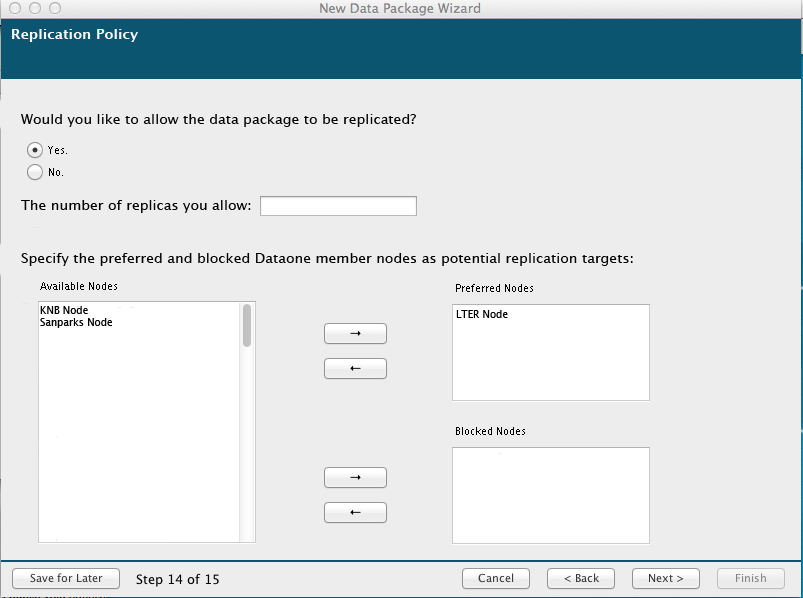
<style>
.page{position:relative;width:803px;height:598px;background:#ededed}
.page>*{position:absolute;margin:0}
.t1{font:14px "LucidaGrande-Bold";color:#fcfafa}
.t2{font:14px "LucidaGrande";color:#020202}
.t3{font:10px "LucidaGrande";color:#000000}
.t4{font:14px "LucidaGrande";color:#000000}
</style>
<div class="page">
<p class="t1" style="left:12px;top:29px;width:126px;height:13px">Replication Policy</p>
<p class="t2" style="left:21px;top:114px;width:395px;height:13px">Would you like to allow the data package to be replicated?</p>
<p class="t3" style="left:48px;top:146px;width:19px;height:8px">Yes.</p>
<p class="t3" style="left:49px;top:168px;width:14px;height:8px">No.</p>
<p class="t4" style="left:21px;top:200px;width:230px;height:13px">The number of replicas you allow:</p>
<p class="t4" style="left:21px;top:253px;width:612px;height:13px">Specify the preferred and blocked Dataone member nodes as potential replication targets:</p>
<p class="t3" style="left:40px;top:282px;width:77px;height:8px">Available Nodes</p>
<p class="t3" style="left:456px;top:284px;width:77px;height:8px">Preferred Nodes</p>
<p class="t3" style="left:40px;top:306px;width:72px;height:22px">KNB Node<br>Sanparks Node</p>
<p class="t3" style="left:456px;top:310px;width:52px;height:8px">LTER Node</p>
<p class="t3" style="left:456px;top:427px;width:69px;height:8px">Blocked Nodes</p>
</div>
